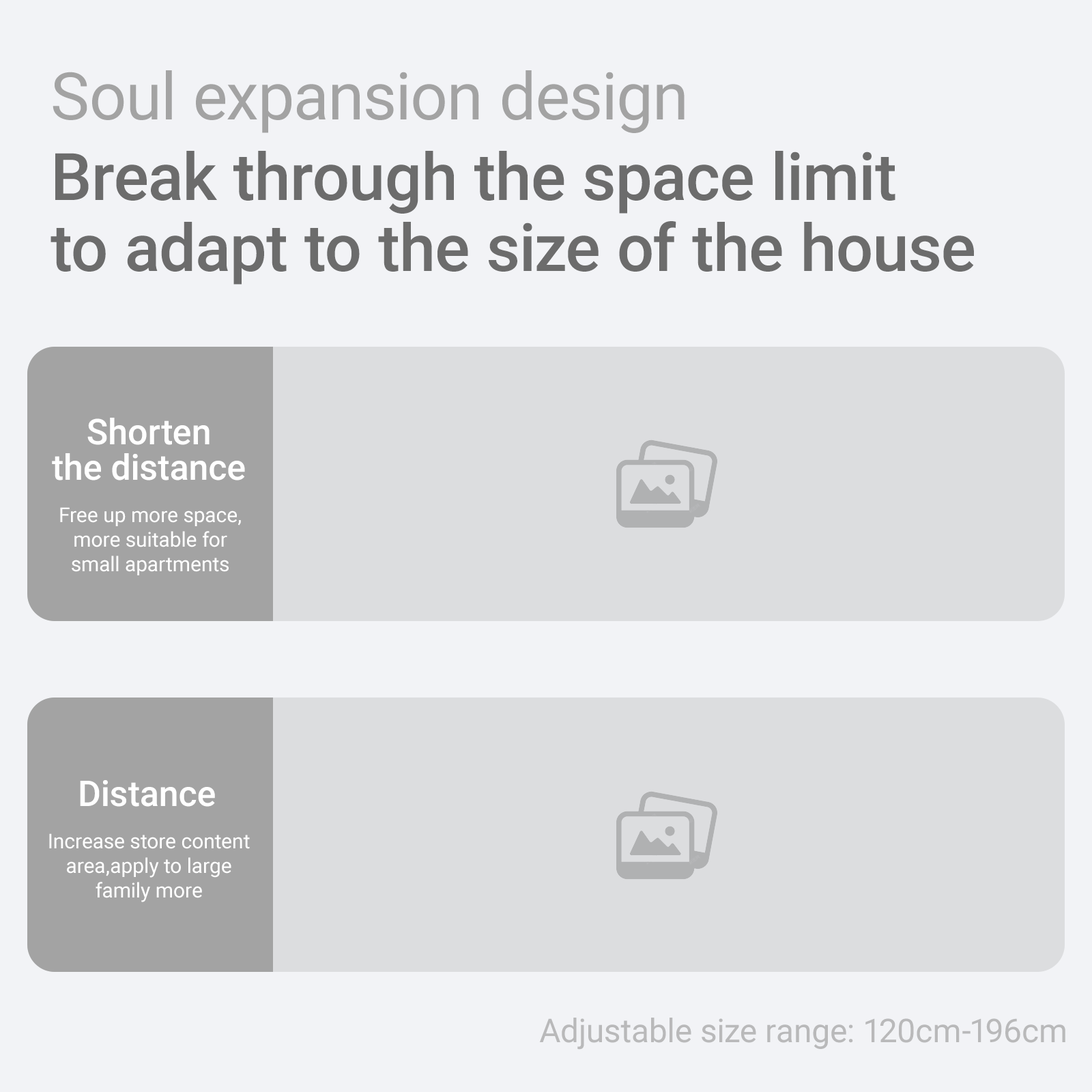
<style>
.page{position:relative;width:1092px;height:1092px;background:#f2f3f6}
.page>*{position:absolute;margin:0}
.t1{font:65.5px "Roboto-Regular";color:#a3a3a3}
.t2{font:65.5px/71px "Roboto-Medium";color:#6c6c6c}
.t3{font:35.5px/35.5px "Roboto-Medium";color:#ffffff}
.t4{font:20.5px/24.6px "Roboto-Regular";color:#ffffff}
.t5{font:35.5px "Roboto-Medium";color:#ffffff}
.t6{font:32.8px "Roboto-Regular";color:#a3a3a3}
</style>
<div class="page">
<p class="t1" style="left:53px;top:70px;width:632px;height:63px">Soul expansion design</p>
<p class="t2" style="left:51px;top:151px;width:923px;height:134px">Break through the space limit<br>to adapt to the size of the house</p>
<p class="t3" style="left:52px;top:418px;width:193px;height:62px;text-align:center">Shorten<br>the distance</p>
<p class="t4" style="left:60px;top:507px;width:181px;height:68px;text-align:center">Free up more space,<br>more suitable for<br>small apartments</p>
<p class="t5" style="left:80px;top:780px;width:135px;height:27px">Distance</p>
<p class="t4" style="left:49px;top:833px;width:201px;height:69px;text-align:center">Increase store content<br>area,apply to large<br>family more</p>
<p class="t6" style="left:539px;top:1018px;width:526px;height:32px;opacity:0.75">Adjustable size range: 120cm-196cm</p>
</div>
